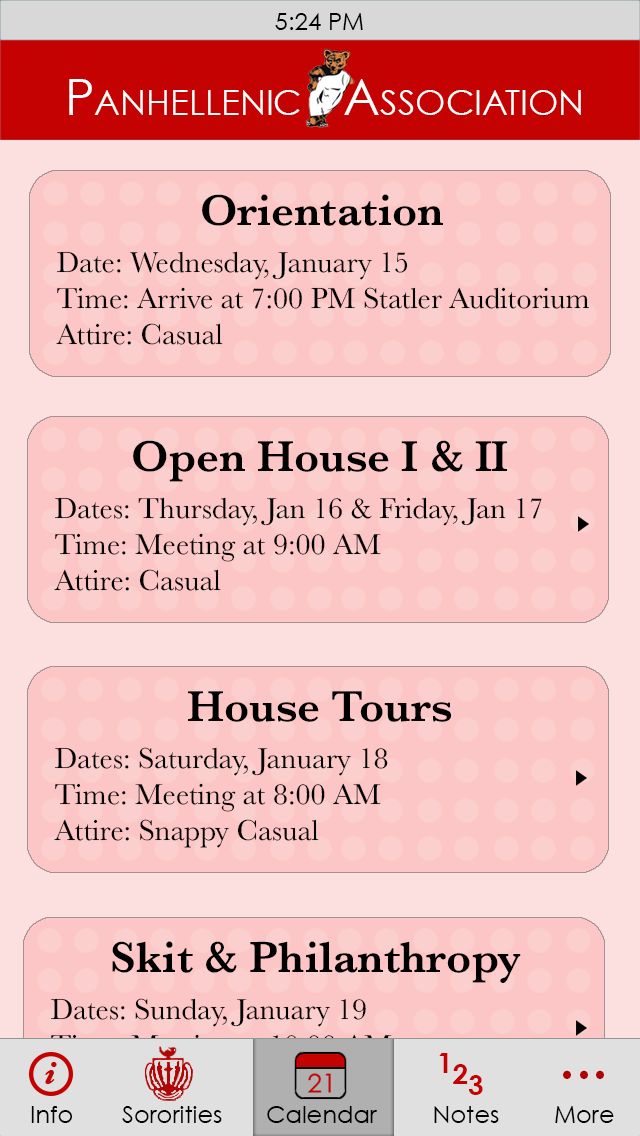
<style>
.page{position:relative;width:640px;height:1136px;background:#fcc6c6}
.page>*{position:absolute;margin:0}
.t1{font:50px "CenturyGothic";color:#ffffff;font-variant:small-caps}
.t2{font:50px "CenturyGothic";color:#ffffff}
.t3{font:45px "Baskerville-SemiBold";color:#000000}
.t4{font:30px "Baskerville";color:#000000}
.t5{font:30px "Baskerville"}
.t6{font:28px/11px "CenturyGothic-Bold";color:#c40202}
.t7{font:72px "MinionPro-Regular";color:#b00000}
.t8{font:24px "CenturyGothic";color:#000000}
</style>
<div class="page">
<p class="t1" style="left:69px;top:79px;width:512px;height:36px"><span class="t2"> P</span>anhellenic   Association</p>
<p class="t3" style="left:202px;top:194px;width:241px;height:32px">Orientation</p>
<p class="t4" style="left:56px;top:251px;width:533px;height:94px">Date: Wednesday, January 15<br>Time: Arrive at 7:00 PM Statler Auditorium<br>Attire: Casual</p>
<p class="t3" style="left:133px;top:440px;width:374px;height:42px">Open House I &amp; II</p>
<p class="t4" style="left:54px;top:497px;width:488px;height:94px">Dates: Thursday, Jan 16 &amp; Friday, Jan 17<br>Time: Meeting at 9:00 AM<br>Attire: Casual</p>
<p class="t3" style="left:188px;top:691px;width:263px;height:31px">House Tours</p>
<p class="t4" style="left:54px;top:747px;width:334px;height:101px">Dates: Saturday, January 18<br>Time: Meeting at 8:00 AM<br>Attire: Snappy Casual</p>
<p class="t3" style="left:112px;top:941px;width:409px;height:42px">Skit &amp; Philanthropy</p>
<p class="t5" style="left:51px;top:998px;width:341px;height:65px">Dates: Sunday, January 19<br>Time: Meeting at 10:00 AM</p>
<p class="t6" style="left:439px;top:1053px;width:44px;height:42px">1<br>  2<br>    3</p>
<p class="t7" style="left:563px;top:1070px;width:41px;height:9px">...</p>
<p class="t8" style="left:31px;top:1106px;width:583px;height:17px">Info    Sororities    Calendar   Notes    More</p>
</div>
